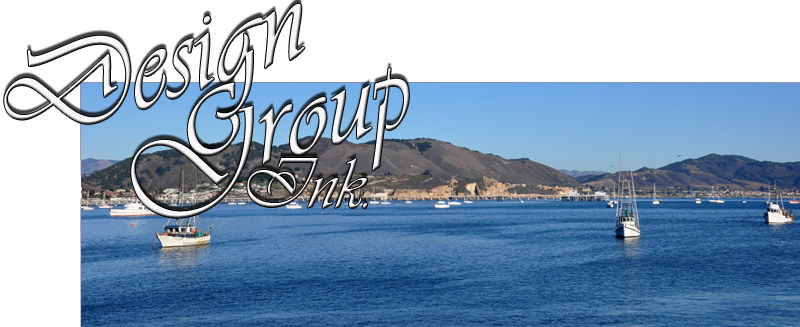
<style>
.page{position:relative;width:800px;height:327px;background:#ffffff}
.page>*{position:absolute;margin:0}
.t1{font:125px "Vianta";color:#f8f8fa}
.t2{font:72px "Vianta"}
</style>
<div class="page">
<p class="t1" style="left:131px;top:68px;width:278px;height:150px;rotate:-14deg">Group</p>
<p class="t2" style="left:247px;top:158px;width:121px;height:50px">Ink.</p>
</div>
